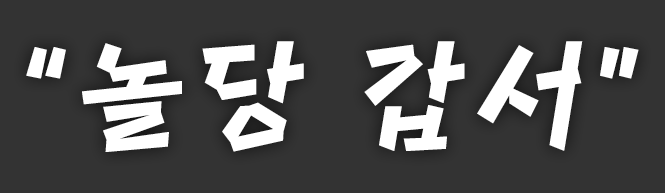
<style>
.page{position:relative;width:665px;height:193px;background:#333333}
.page>*{position:absolute;margin:0}
.t1{font:116px "MapoHongdaeFreedom";letter-spacing:0.075em;color:#ffffff}
</style>
<div class="page">
<p class="t1" style="left:26px;top:41px;width:613px;height:111px">“놀당 갑서”</p>
</div>
